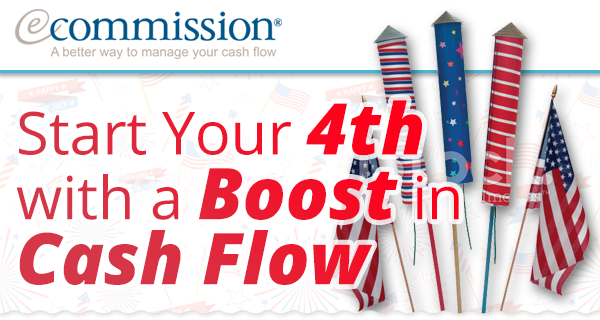
<style>
.page{position:relative;width:600px;height:320px;background:#ffffff}
.page>*{position:absolute;margin:0}
.t1{font:59.6px/65px "OpenSans"}
.t2{font:71.5px/65px "OpenSans-ExtraboldItalic"}
</style>
<div class="page">
<p class="t1" style="left:16px;top:100px;width:443px;height:185px">Start Your <span class="t2">4th<br></span>with a <span class="t2">Boost</span> in<br><span class="t2">Cash Flow</span></p>
</div>
